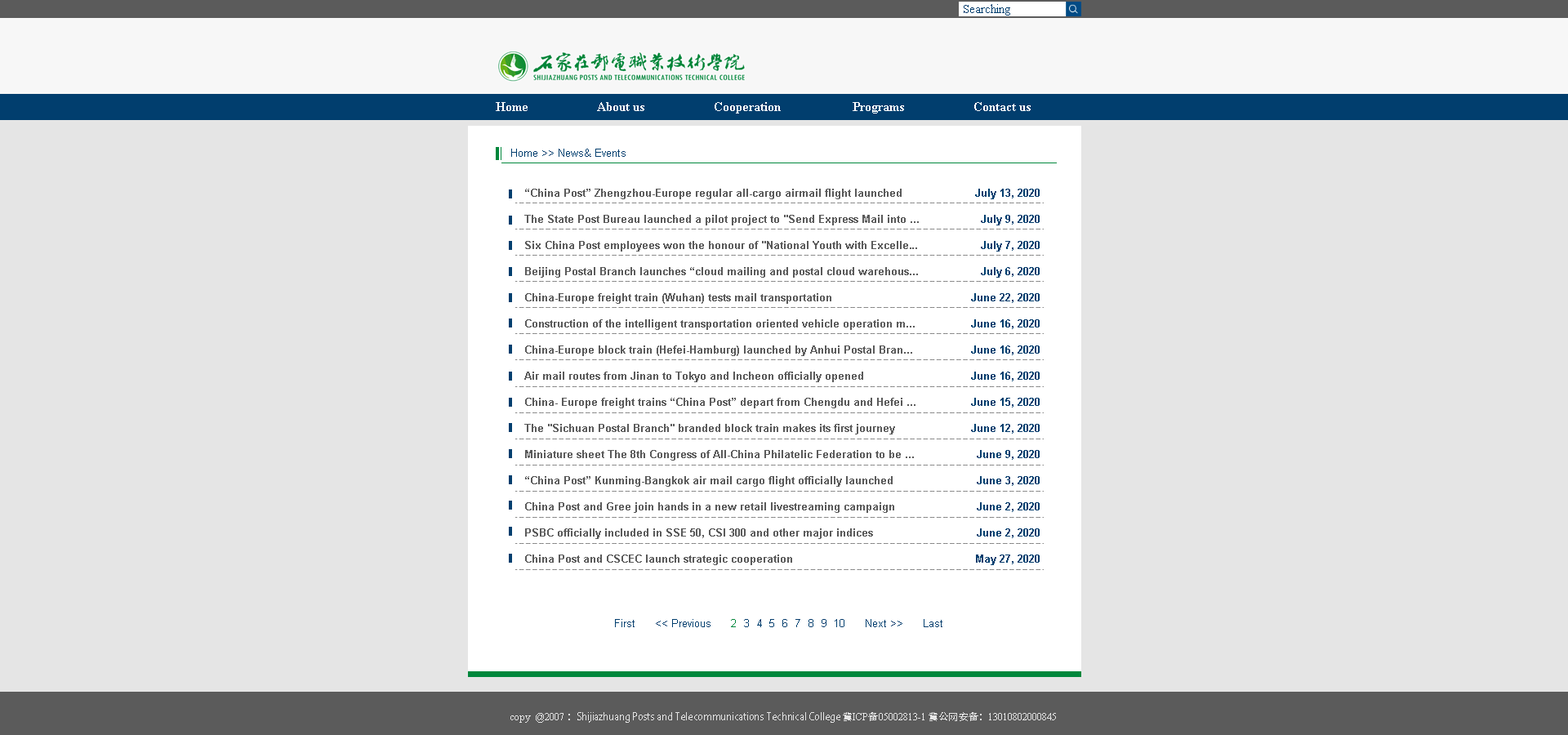
<style>
.page{position:relative;width:1568px;height:735px;background:#e5e5e5}
.page>*{position:absolute;margin:0}
.t1{font:12px "TimesNewRomanPSMT";color:#013e6e}
.t2{font:13.1px "TimesNewRomanPS-BoldMT";color:#ffffff}
.t3{font:10.9px "ArialMT";color:#013e6e}
.t4{font:10.9px/26.1px "Arial-BoldMT";color:#5b5b5b}
.t5{font:10.9px/26.1px "AdobeHeitiStd-Regular";color:#5b5b5b}
.t6{font:10.9px/26.1px "Arial-BoldMT";color:#013e6e}
.t7{font:10.9px "ArialMT";letter-spacing:0.18em;color:#00873c}
.t8{font:10.9px "ArialMT";letter-spacing:0.18em;color:#013e6e}
.t9{font:9.8px "AdobeHeitiStd-Regular";color:#e5e5e5}
.t10{font:9.8px "TimesNewRomanPSMT";color:#e5e5e5}
</style>
<div class="page">
<p class="t1" style="left:964px;top:4px;width:46px;height:12px">Searching</p>
<p class="t2" style="left:496px;top:102px;width:535px;height:12px">Home                     About us                     Cooperation                      Programs                     Contact us</p>
<p class="t3" style="left:511px;top:149px;width:115px;height:8px">Home &gt;&gt; News&amp; Events</p>
<p class="t4" style="left:524px;top:189px;width:395px;height:376px">“China Post” Zhengzhou-Europe regular all-cargo airmail flight launched<br>The State Post Bureau launched a pilot project to "Send Express Mail into ...<br>Six China Post employees won the honour of "National Youth with Excelle<span class="t5">...<br></span>Beijing Postal Branch launches “cloud mailing and postal cloud warehous...<br>China-Europe freight train (Wuhan) tests mail transportation<br>Construction of the intelligent transportation oriented vehicle operation m...<br>China-Europe block train (Hefei-Hamburg) launched by Anhui Postal Bran... <br>Air mail routes from Jinan to Tokyo and Incheon officially opened<br>China- Europe freight trains “China Post” depart from Chengdu and Hefei ...<br>The "Sichuan Postal Branch" branded block train makes its first journey<br>Miniature sheet The 8th Congress of All-China Philatelic Federation to be ...<br>“China Post” Kunming-Bangkok air mail cargo flight officially launched<br>China Post and Gree join hands in a new retail livestreaming campaign<br>PSBC officially included in SSE 50, CSI 300 and other major indices<br>China Post and CSCEC launch strategic cooperation</p>
<p class="t6" style="left:971px;top:189px;width:69px;height:376px;text-align:right">July 13, 2020<br>July 9, 2020<br>July 7, 2020<br>July 6, 2020<br>June 22, 2020<br>June 16, 2020<br>June 16, 2020<br>June 16, 2020<br>June 15, 2020<br>June 12, 2020<br>June 9, 2020<br>June 3, 2020<br>June 2, 2020<br>June 2, 2020<br>May 27, 2020</p>
<p class="t3" style="left:615px;top:619px;width:327px;height:8px">First      &lt;&lt; Previous      <span class="t7">2</span><span class="t8"> 3 4 5 6 7 8 9 </span>10      Next &gt;&gt;      Last</p>
<p class="t9" style="left:510px;top:712px;width:546px;height:11px"><span class="t10">copy  @2007 </span>：Shijiazhuang Posts and Telecommunications Technical College 冀<span class="t10">ICP</span>备<span class="t10">05002813-1 </span>冀公网安备：<span class="t10">13010802000845</span></p>
</div>
